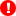
<style>
.page{position:relative;width:16px;height:16px;background:#ff0000}
.page>*{position:absolute;margin:0}
.t1{font:22px "BrowalliaNew-Bold";color:#ffffff;scale:1.5 1}
</style>
<div class="page">
<p class="t1" style="left:7px;top:2px;width:3px;height:11px">!</p>
</div>
